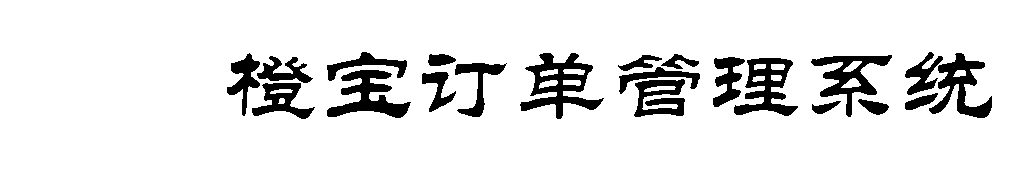
<style>
.page{position:relative;width:1033px;height:176px;background:#ffffff}
.page>*{position:absolute;margin:0}
.t1{font:96px "STLiti";letter-spacing:0.01em;color:#000000}
</style>
<div class="page">
<p class="t1" style="left:227px;top:52px;width:765px;height:67px">橙宝订单管理系统</p>
</div>
